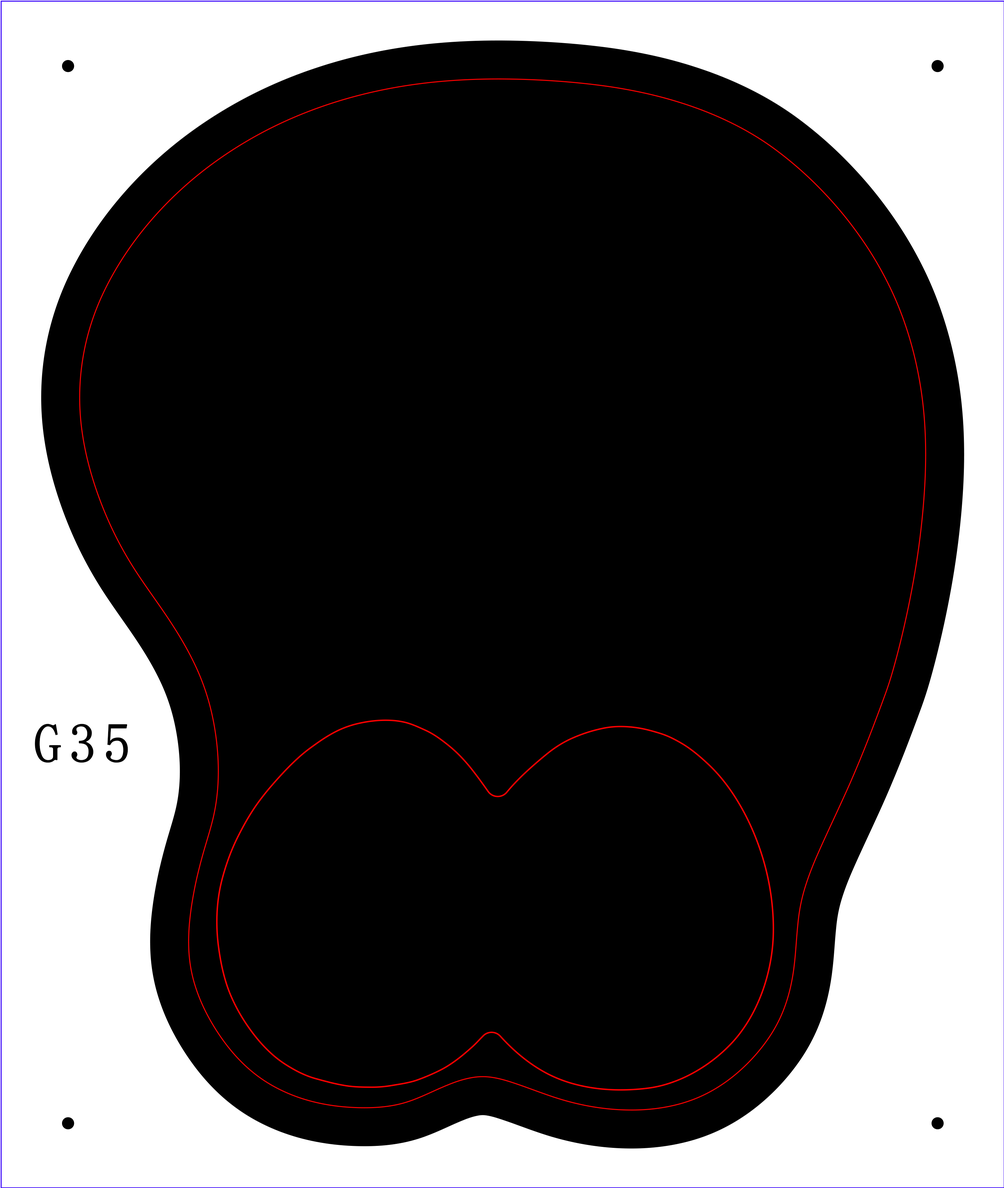
<style>
.page{position:relative;width:1004px;height:1188px;background:#000000}
.page>*{position:absolute;margin:0}
.t1{font:55.4px "SimSun";letter-spacing:0.1em;color:#000000;font-weight:bold}
</style>
<div class="page">
<p class="t1" style="left:35px;top:724px;width:93px;height:39px">G35</p>
</div>
